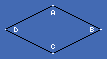
<style>
.page{position:relative;width:107px;height:59px;background:#436ab3}
.page>*{position:absolute;margin:0}
.t1{font:8px "Fontix-Regular";color:#ffffff}
</style>
<div class="page">
<p class="t1" style="left:51px;top:10px;width:4px;height:5px">A</p>
<p class="t1" style="left:14px;top:27px;width:4px;height:5px">D</p>
<p class="t1" style="left:90px;top:27px;width:4px;height:5px">B</p>
<p class="t1" style="left:51px;top:44px;width:4px;height:5px">C</p>
</div>
